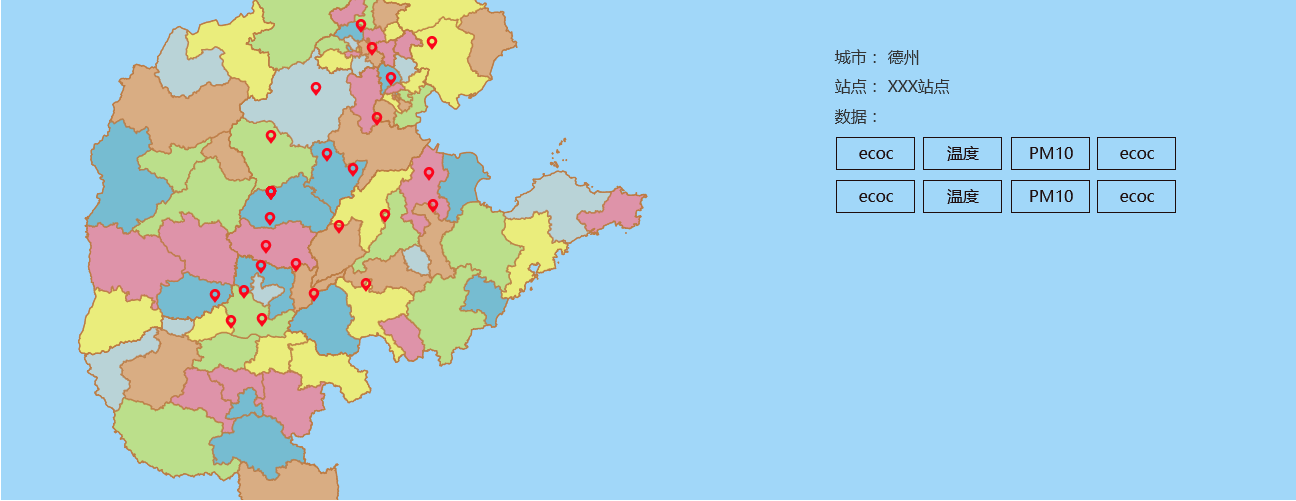
<style>
.page{position:relative;width:1296px;height:501px;background:#a1d7f9}
.page>*{position:absolute;margin:0}
.t1{font:16px "MicrosoftYaHei";color:#333333}
.t2{font:16px "MicrosoftYaHei";color:#1e0d0d}
</style>
<div class="page">
<p class="t1" style="left:834px;top:49px;width:85px;height:16px">城市： 德州</p>
<p class="t1" style="left:835px;top:79px;width:115px;height:15px">站点： XXX站点</p>
<p class="t1" style="left:835px;top:109px;width:41px;height:15px">数据：</p>
<p class="t2" style="left:859px;top:150px;width:34px;height:9px">ecoc</p>
<p class="t2" style="left:947px;top:146px;width:32px;height:15px">温度</p>
<p class="t2" style="left:1030px;top:147px;width:43px;height:12px">PM10</p>
<p class="t2" style="left:1120px;top:150px;width:34px;height:9px">ecoc</p>
<p class="t2" style="left:859px;top:193px;width:34px;height:9px">ecoc</p>
<p class="t2" style="left:947px;top:189px;width:32px;height:15px">温度</p>
<p class="t2" style="left:1030px;top:190px;width:43px;height:12px">PM10</p>
<p class="t2" style="left:1120px;top:193px;width:34px;height:9px">ecoc</p>
</div>
